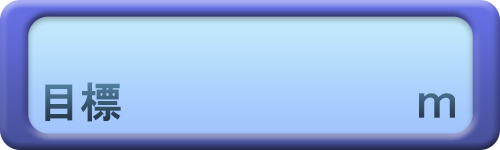
<style>
.page{position:relative;width:500px;height:150px}
.page>*{position:absolute;margin:0}
.t1{font:42px "HGSGothicE"}
</style>
<div class="page">
<p class="t1" style="left:45px;top:82px;width:410px;height:40px">目標　　　　　　　ｍ</p>
</div>
